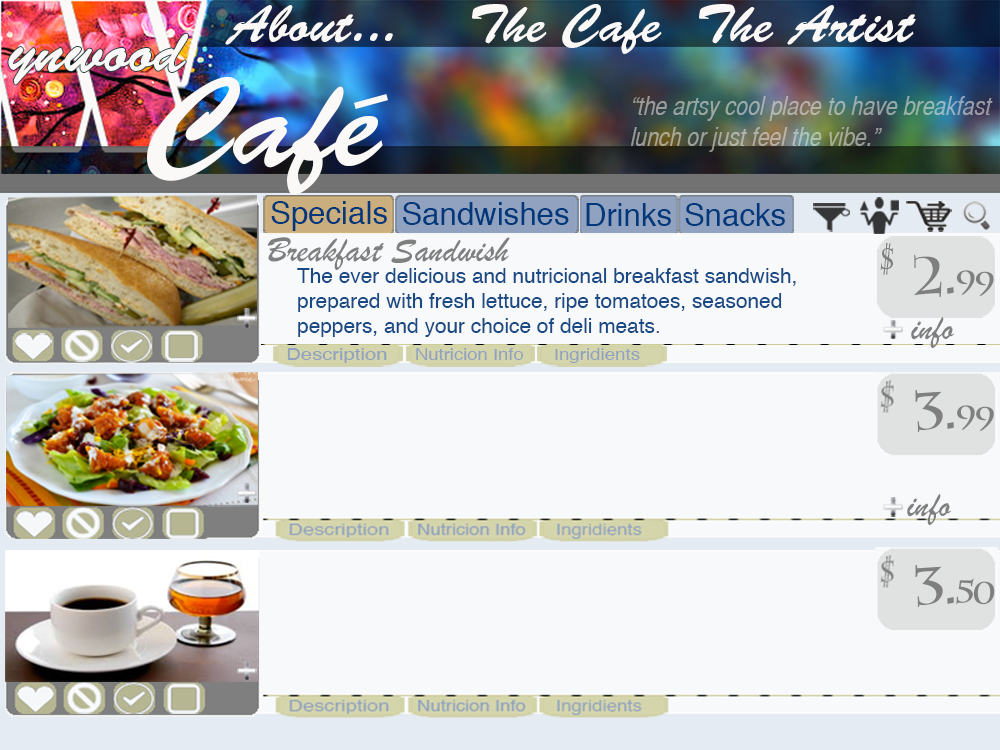
<style>
.page{position:relative;width:1000px;height:750px;background:#f7f9fa}
.page>*{position:absolute;margin:0}
.t1{font:52.1px "BrushScriptStd";color:#faf9f7}
.t2{font:62.5px "BrushScriptStd";color:#faf9f7}
.t3{font:125px "BrushScriptStd";color:#faf9f7}
.t4{font:26px "HelveticaCYOblique";color:#9caaa5}
.t5{font:31.2px "Helvetica";color:#00387b}
.t6{font:36.5px "BrushScriptMT";color:#7f7f7f}
.t7{font:31.2px "CharlemagneStd-Bold";letter-spacing:-0.075em;color:#7f7f7f}
.t8{font:52.1px "CharlemagneStd-Bold";letter-spacing:-0.075em;color:#7f7f7f}
.t9{font:20.8px "Helvetica";color:#1a4a86}
.t10{font:20.8px "Helvetica";color:#525d6f}
.t11{font:15.9px "Helvetica";color:#90a2bf;scale:1.28 1}
.t12{font:15.9px "Helvetica";color:#90a2bf;scale:1.16 1}
.t13{font:15.9px "Helvetica";color:#90a2bf;scale:1.18 1}
</style>
<div class="page">
<p class="t1" style="left:225px;top:4px;width:691px;height:50px">About...    The Cafe  The Artist</p>
<p class="t2" style="left:8px;top:33px;width:180px;height:52px">ynwood</p>
<p class="t3" style="left:147px;top:76px;width:236px;height:120px">Cafe</p>
<p class="t4" style="left:631px;top:96px;width:362px;height:56px">“the artsy cool place to have breakfast<br>lunch or just feel the vibe.”</p>
<p class="t5" style="left:271px;top:201px;width:116px;height:30px">Specials</p>
<p class="t5" style="left:403px;top:202px;width:166px;height:23px">Sandwishes</p>
<p class="t5" style="left:586px;top:203px;width:85px;height:23px">Drinks</p>
<p class="t5" style="left:685px;top:203px;width:100px;height:23px">Snacks</p>
<p class="t6" style="left:267px;top:237px;width:243px;height:33px">Breakfast Sandwish</p>
<p class="t7" style="left:880px;top:243px;width:14px;height:32px">$</p>
<p class="t8" style="left:913px;top:254px;width:81px;height:44px">2.<span class="t7">99</span></p>
<p class="t9" style="left:297px;top:268px;width:499px;height:69px">The ever delicious and nutricional breakfast sandwish, <br>prepared with fresh lettuce, ripe tomatoes, seasoned <br>peppers, and your choice of deli meats<span class="t10">.</span></p>
<p class="t6" style="left:911px;top:317px;width:43px;height:31px">info</p>
<p class="t11" style="left:287px;top:348px;width:100px;height:15px">Description</p>
<p class="t12" style="left:416px;top:348px;width:108px;height:12px">Nutricion Info</p>
<p class="t13" style="left:555px;top:348px;width:85px;height:15px">Ingridients</p>
<p class="t8" style="left:915px;top:389px;width:79px;height:44px">3.<span class="t7">99</span></p>
<p class="t6" style="left:907px;top:494px;width:44px;height:31px">info</p>
<p class="t8" style="left:915px;top:564px;width:80px;height:44px">3.<span class="t7">50</span></p>
</div>
